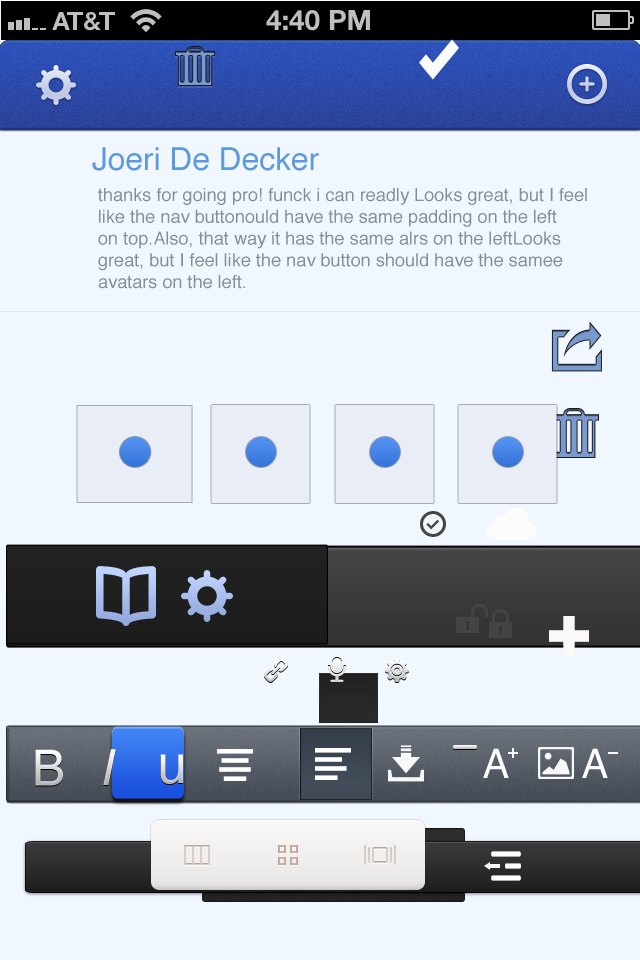
<style>
.page{position:relative;width:640px;height:960px;background:#f0f7ff}
.page>*{position:absolute;margin:0}
.t1{font:31.7px "Helvetica";color:#5c99dd}
.t2{font:18.1px "Helvetica";color:#878c93}
.t3{font:49.8px "Helvetica"}
.t4{font:49.8px "Helvetica-Oblique"}
.t5{font:40.8px "Helvetica";color:#fdfdff}
.t6{font:54.3px "Helvetica"}
.t7{font:13.6px "Helvetica-Bold";color:#d8cdc7}
</style>
<div class="page">
<p class="t1" style="left:92px;top:147px;width:227px;height:24px">Joeri De Decker</p>
<p class="t2" style="left:98px;top:188px;width:489px;height:101px">thanks for going pro! funck i can readly Looks great, but I feel <br>like the nav buttonould have the same padding on the left <br>on top.Also, that way it has the same alrs on the leftLooks<br>great, but I feel like the nav button should have the samee <br>avatars on the left.</p>
<p class="t3" style="left:35px;top:749px;width:28px;height:37px">B</p>
<p class="t4" style="left:103px;top:749px;width:13px;height:36px">I</p>
<p class="t5" style="left:483px;top:748px;width:26px;height:30px">A</p>
<p class="t5" style="left:582px;top:748px;width:26px;height:30px">A</p>
<p class="t6" style="left:160px;top:754px;width:23px;height:30px">u</p>
<p class="t7" style="left:205px;top:849px;width:5px;height:10px">1</p>
</div>
